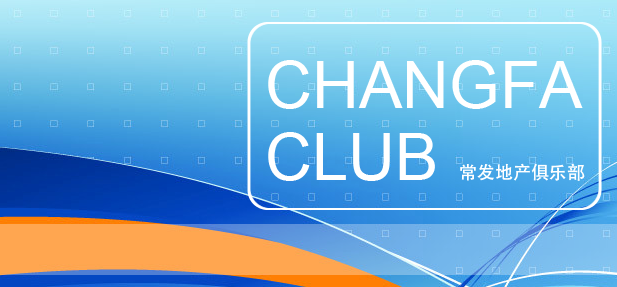
<style>
.page{position:relative;width:617px;height:287px}
.page>*{position:absolute;margin:0}
.t1{font:65px/72px "ArialMT";color:#ffffff}
.t2{font:18px "AdobeHeitiStd-Regular";color:#ffffff}
</style>
<div class="page">
<p class="t1" style="left:268px;top:60px;width:315px;height:121px">CHANGFA<br>CLUB</p>
<p class="t2" style="left:460px;top:163px;width:125px;height:18px">常发地产俱乐部</p>
</div>
